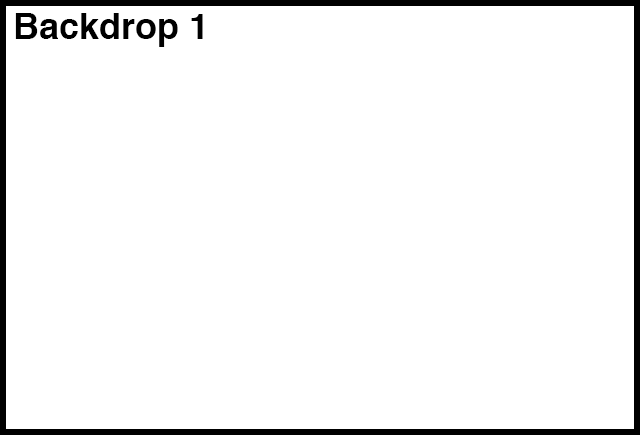
<style>
.page{position:relative;width:640px;height:435px;background:#ffffff}
.page>*{position:absolute;margin:0}
.t1{font:36px "Helvetica-Bold";color:#000000}
</style>
<div class="page">
<p class="t1" style="left:15px;top:13px;width:188px;height:34px">Backdrop 1</p>
</div>
